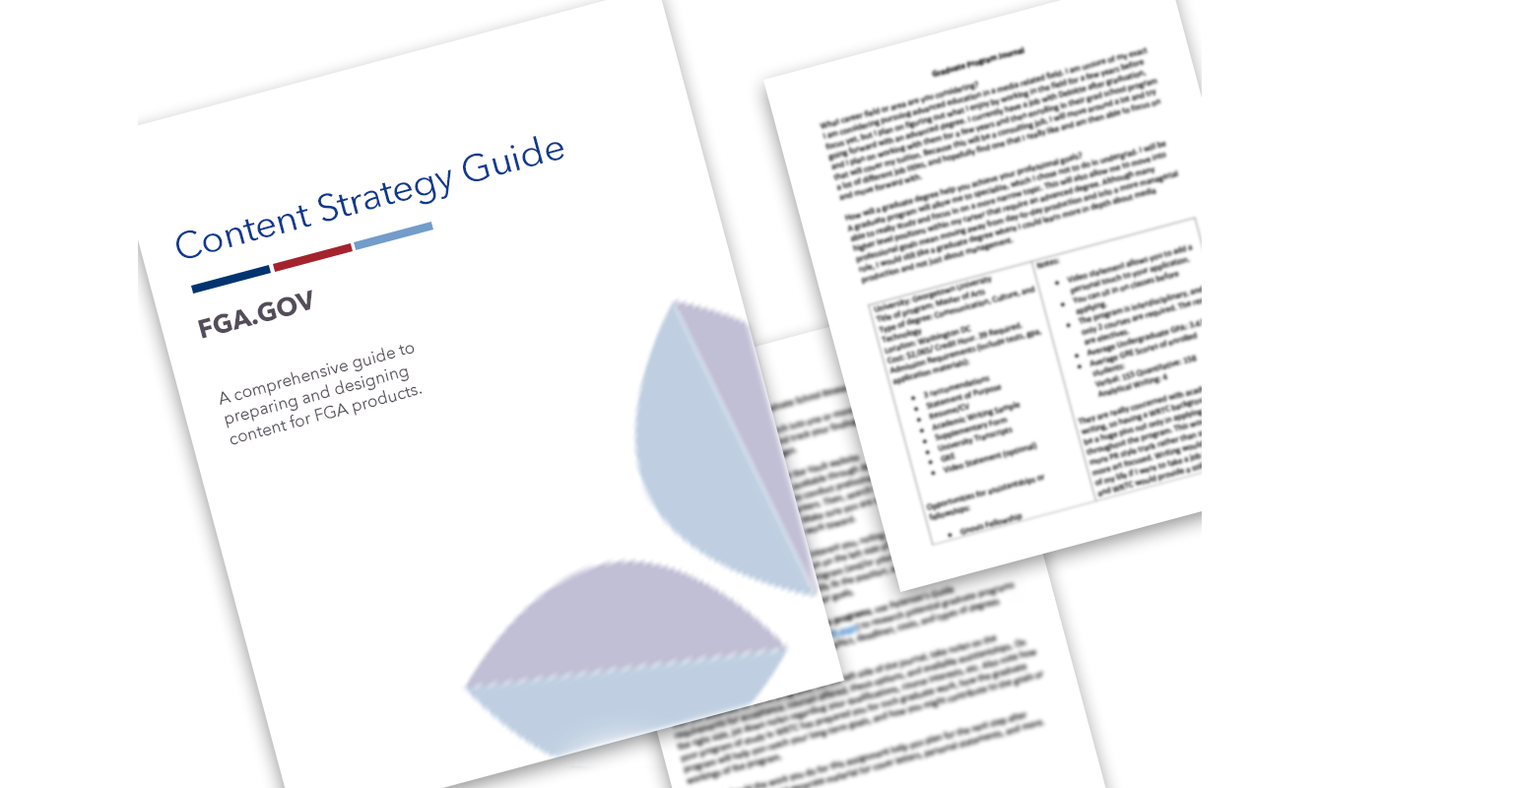
<style>
.page{position:relative;width:1513px;height:788px;background:#ffffff}
.page>*{position:absolute;margin:0}
.t1{font:37.3px "AvenirNext-Regular";color:#0c3a8f}
.t2{font:25.6px "AvenirNext-Bold";color:#544d59}
.t3{font:16.8px "AvenirNext-Regular";color:#544d59}
</style>
<div class="page">
<p class="t1" style="left:176px;top:136px;width:388px;height:123px;rotate:-15deg">Content Strategy Guide</p>
<p class="t2" style="left:198px;top:290px;width:114px;height:49px;rotate:-15deg">FGA.GOV</p>
<p class="t3" style="left:220px;top:345px;width:203px;height:100px;rotate:-15deg">A comprehensive guide to preparing and designing content for FGA products.</p>
</div>
